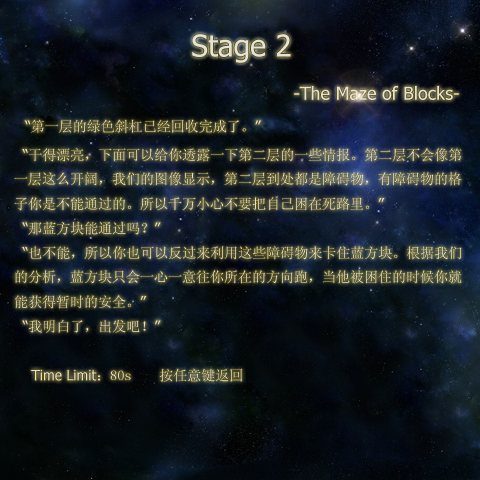
<style>
.page{position:relative;width:480px;height:480px}
.page>*{position:absolute;margin:0}
.t1{font:14px "SimSun";color:#e4e1e1}
.t2{font:24px "Tahoma";color:#e4e1e1}
.t3{font:30px "Tahoma";color:#e4e1e1}
.t4{font:18px "Tahoma";color:#e4e1e1}
.t5{font:14px "Tahoma";color:#e4e1e1}
</style>
<div class="page">
<p class="t1" style="left:14px;top:34px;width:448px;height:348px"><span class="t2"><br></span><span class="t3">Stage 2<br></span><span class="t4">                                                -The Maze of Blocks-<br>  </span><span class="t5">“</span>第一层的绿色斜杠已经回收完成了。<span class="t5">”<br>  “</span>干得漂亮，下面可以给你透露一下第二层的一些情报。第二层不会像第一层这么开阔，我们的图像显示，第二层到处都是障碍物，有障碍物的格子你是不能通过的。所以千万小心不要把自己困在死路里。<span class="t5">”<br>  “</span>那蓝方块能通过吗？<span class="t5">”<br>  “</span>也不能，所以你也可以反过来利用这些障碍物来卡住蓝方块。根据我们的分析，蓝方块只会一心一意往你所在的方向跑，当他被困住的时候你就能获得暂时的安全。<span class="t5">”<br>  “</span>我明白了，出发吧！<span class="t5">”<br><br>    Time Limit</span>：80s    按任意键返回</p>
</div>
